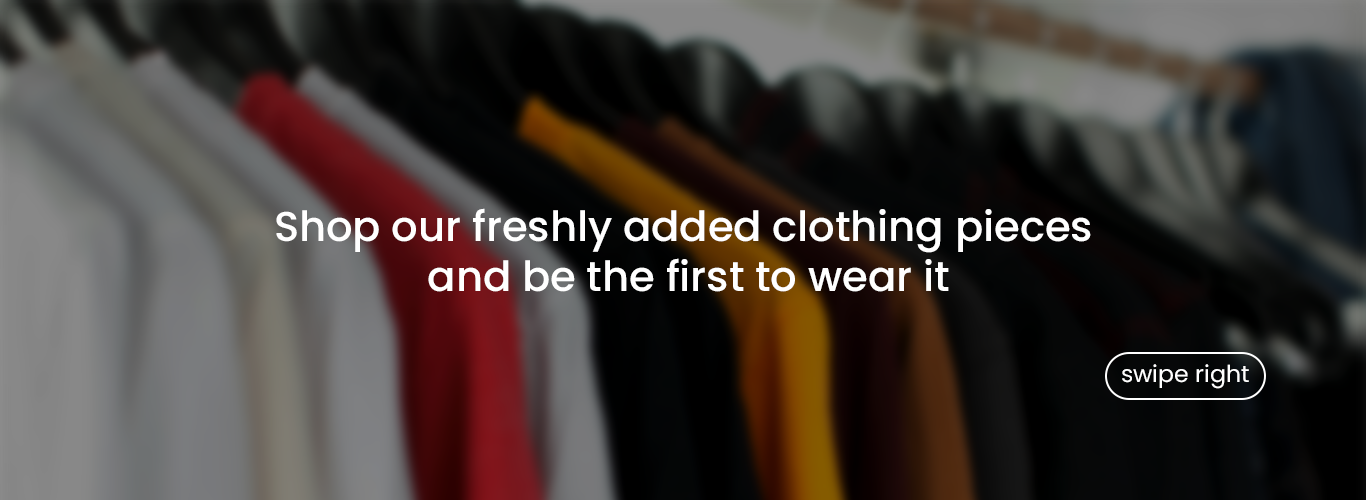
<style>
.page{position:relative;width:1366px;height:500px}
.page>*{position:absolute;margin:0}
.t1{font:41.7px "Poppins-Medium";color:#ffffff}
.t2{font:23.3px "Poppins-Regular";color:#ffffff}
</style>
<div class="page">
<p class="t1" style="left:276px;top:208px;width:815px;height:84px;text-align:center">Shop our freshly added clothing pieces<br> and be the first to wear it</p>
<p class="t2" style="left:1122px;top:364px;width:127px;height:25px">swipe right</p>
</div>
